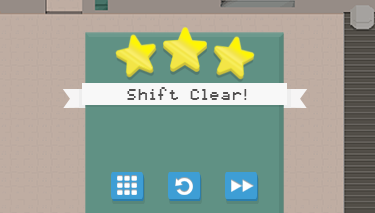
<style>
.page{position:relative;width:375px;height:213px;background:#609184}
.page>*{position:absolute;margin:0}
.t1{font:13.4px "pixelmix";letter-spacing:0.1em;color:#525050}
</style>
<div class="page">
<p class="t1" style="left:127px;top:87px;width:120px;height:13px">Shift Clear!</p>
</div>
